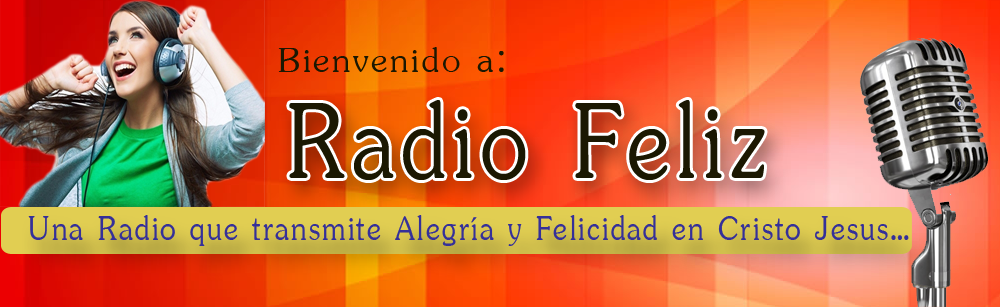
<style>
.page{position:relative;width:1000px;height:307px}
.page>*{position:absolute;margin:0}
.t1{font:53.1px "JasmineUPC";letter-spacing:0.05em;color:#1b1802}
.t2{font:166.1px "JasmineUPC";letter-spacing:0.05em;color:#1b1802;scale:0.83 1}
.t3{font:53.1px "JasmineUPC";letter-spacing:0.05em;color:#353099;scale:0.84 1}
</style>
<div class="page">
<p class="t1" style="left:278px;top:47px;width:226px;height:25px">Bienvenido a:</p>
<p class="t2" style="left:289px;top:100px;width:476px;height:80px">Radio Feliz</p>
<p class="t3" style="left:28px;top:215px;width:881px;height:31px">Una Radio que transmite Alegría y Felicidad en Cristo Jesus…</p>
</div>
